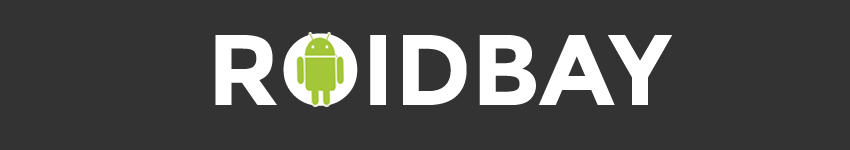
<style>
.page{position:relative;width:850px;height:150px;background:#333333}
.page>*{position:absolute;margin:0}
.t1{font:100px "Montserrat-Bold";color:#ffffff}
</style>
<div class="page">
<p class="t1" style="left:215px;top:33px;width:457px;height:73px">ROIDBAY</p>
</div>
